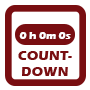
<style>
.page{position:relative;width:90px;height:90px;background:#ffffff}
.page>*{position:absolute;margin:0}
.t1{font:10.7px "ErasITC-Bold";color:#ffffff}
.t2{font:2.7px "ErasITC-Bold";color:#ffffff}
.t3{font:13.3px "ErasITC-Bold";color:#790e11}
</style>
<div class="page">
<p class="t1" style="left:19px;top:32px;width:52px;height:7px"><span class="t2"><br></span>0 h 0m 0s</p>
<p class="t3" style="left:18px;top:51px;width:54px;height:25px;text-align:center">COUNT-<br>DOWN</p>
</div>
